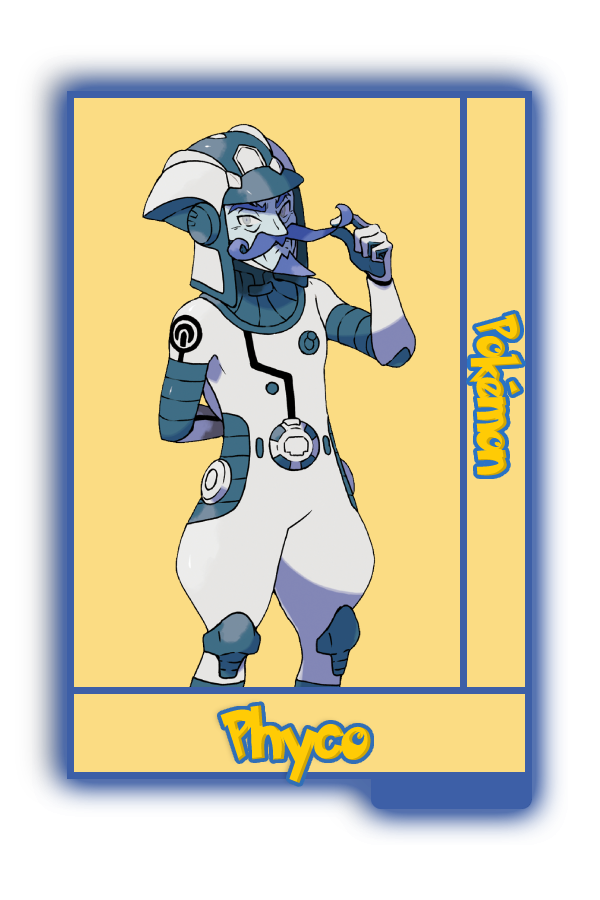
<style>
.page{position:relative;width:600px;height:900px;background:#fbdc83}
.page>*{position:absolute;margin:0}
.t1{font:48.8px "PokemonSolidNormal";color:#ffcb05;scale:0.8 1}
.t2{font:56.6px "PokemonSolidNormal";color:#ffcb05;scale:0.92 1}
</style>
<div class="page">
<p class="t1" style="left:469px;top:313px;width:54px;height:163px;rotate:90deg">Pokémon</p>
<p class="t2" style="left:220px;top:705px;width:151px;height:78px">Phyco</p>
</div>
